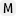
<style>
.page{position:relative;width:16px;height:16px;background:#f0f0f0}
.page>*{position:absolute;margin:0}
.t1{font:14px "UbuntuCondensed-Regular";letter-spacing:0.15em;color:#000000;text-transform:uppercase}
</style>
<div class="page">
<p class="t1" style="left:3px;top:3px;width:10px;height:10px">M</p>
</div>
